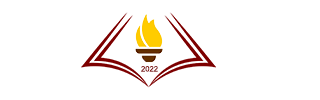
<style>
.page{position:relative;width:320px;height:100px;background:#ffffff}
.page>*{position:absolute;margin:0}
.t1{font:7.6px "ArialMT";color:#872323}
</style>
<div class="page">
<p class="t1" style="left:141px;top:66px;width:17px;height:6px">2022</p>
</div>
